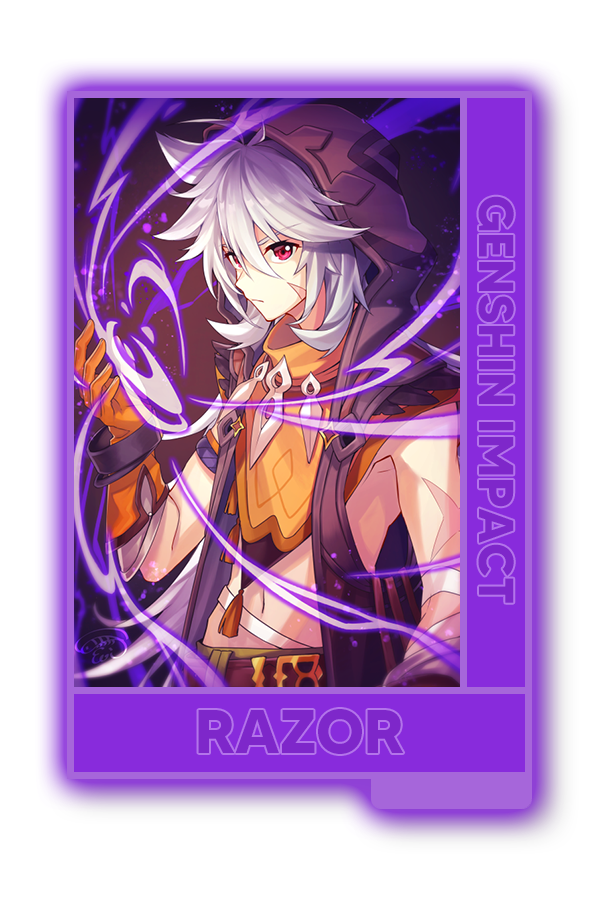
<style>
.page{position:relative;width:600px;height:900px;background:#ffffff}
.page>*{position:absolute;margin:0}
.t1{font:48.8px "MADETOMMY-Bold";color:#7637c6}
.t2{font:61.5px "MADETOMMY-Bold";color:#7637c6}
</style>
<div class="page">
<p class="t1" style="left:478px;top:196px;width:36px;height:407px;rotate:90deg">GENSHIN IMPACT</p>
<p class="t2" style="left:198px;top:709px;width:206px;height:45px">RAZOR</p>
</div>
